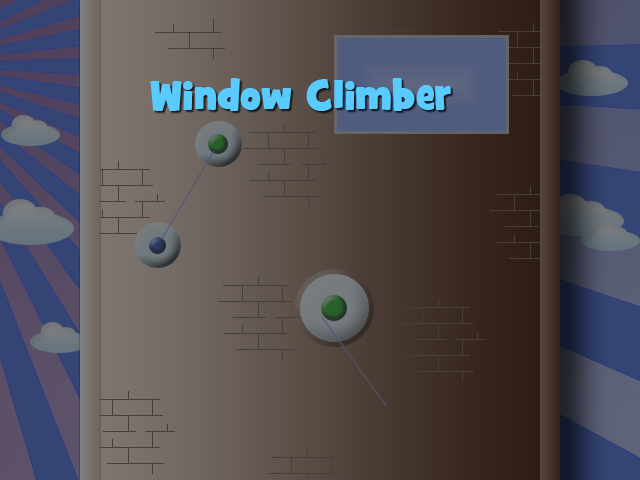
<style>
.page{position:relative;width:640px;height:480px}
.page>*{position:absolute;margin:0}
.t1{font:41px "GrilledCheeseBTNToasted";color:#59cbff}
</style>
<div class="page">
<p class="t1" style="left:150px;top:78px;width:301px;height:33px">Window Climber</p>
</div>
